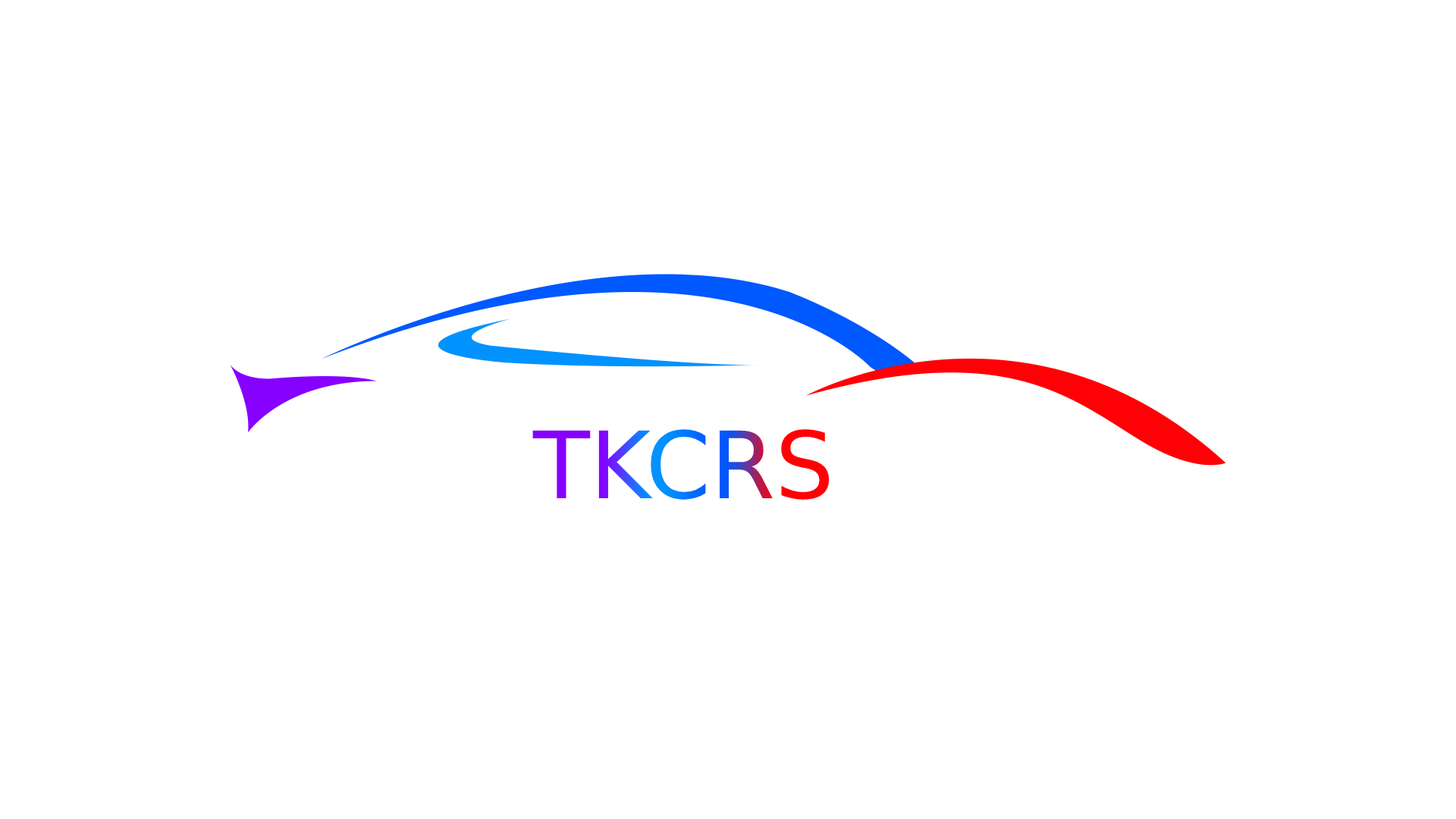
<style>
.page{position:relative;width:1456px;height:819px;background:#ffffff}
.page>*{position:absolute;margin:0}
.t1{font:92.8px "Gotham-Medium"}
</style>
<div class="page">
<p class="t1" style="left:532px;top:429px;width:298px;height:71px">TKCRS</p>
</div>
